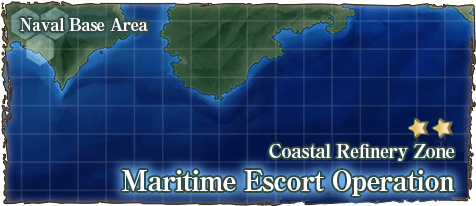
<style>
.page{position:relative;width:476px;height:206px}
.page>*{position:absolute;margin:0}
.t1{font:17px "RyuminPro-ExBold";letter-spacing:-0.04em;color:#ffffff}
.t2{font:19px "RyuminPro-ExBold";letter-spacing:-0.04em;color:#ffffff}
.t3{font:28px "RyuminPro-ExBold";letter-spacing:-0.04em;color:#ffffff}
</style>
<div class="page">
<p class="t1" style="left:20px;top:18px;width:128px;height:14px">Naval Base Area</p>
<p class="t2" style="left:269px;top:143px;width:186px;height:18px">Coastal Refinery Zone</p>
<p class="t3" style="left:122px;top:170px;width:332px;height:26px">Maritime Escort Operation</p>
</div>
